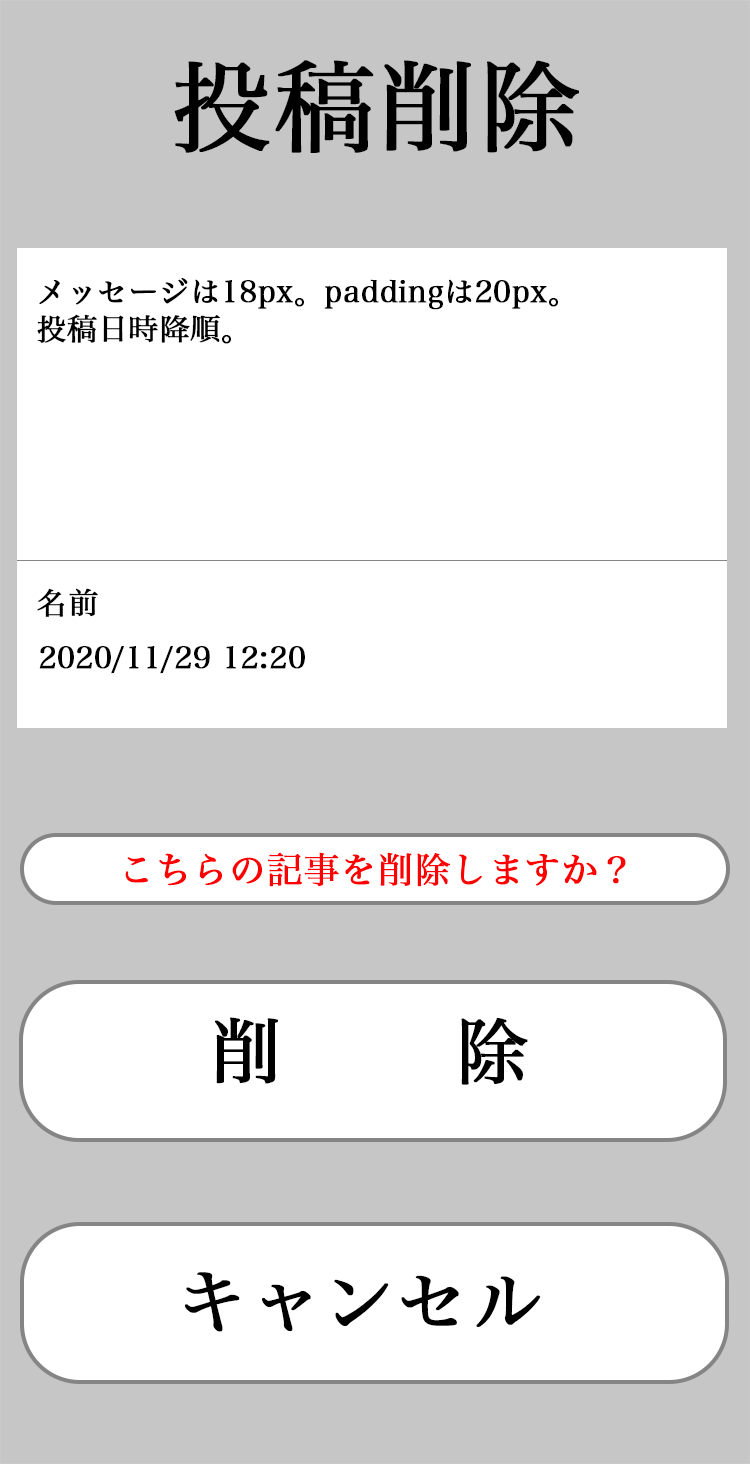
<style>
.page{position:relative;width:750px;height:1464px;background:#ffffff}
.page>*{position:absolute;margin:0}
.t1{font:100px "HiraMinPro-W3";color:#000000;font-weight:bold}
.t2{font:30px/37.2px "HiraMinPro-W3";color:#000000;font-weight:bold}
.t3{font:30px "HiraMinPro-W3";color:#000000;font-weight:bold}
.t4{font:36px "HiraMinPro-W3";color:#ff0000;font-weight:bold}
.t5{font:72px "HiraMinPro-W3";color:#000000;font-weight:bold}
</style>
<div class="page">
<p class="t1" style="left:174px;top:60px;width:405px;height:93px">投稿削除</p>
<p class="t2" style="left:37px;top:278px;width:521px;height:66px">メッセージは18px。paddingは20px。<br>投稿日時降順。</p>
<p class="t3" style="left:37px;top:588px;width:61px;height:29px">名前</p>
<p class="t3" style="left:39px;top:646px;width:266px;height:28px">2020/11/29 12:20</p>
<p class="t4" style="left:125px;top:852px;width:501px;height:35px">こちらの記事を削除しますか？</p>
<p class="t5" style="left:215px;top:1017px;width:313px;height:68px">削除</p>
<p class="t5" style="left:185px;top:1272px;width:356px;height:60px">キャンセル</p>
</div>
